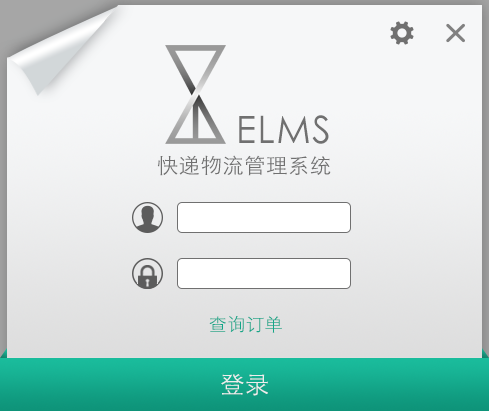
<style>
.page{position:relative;width:489px;height:411px}
.page>*{position:absolute;margin:0}
.t1{font:21.1px/42.1px "STXihei";letter-spacing:0.035em;color:#707070}
.t2{font:37.6px/42.1px "STXihei";letter-spacing:0.035em;color:#707070}
.t3{font:18px "STXihei";letter-spacing:0.035em;color:#13a689}
.t4{font:24px "STXihei";letter-spacing:0.035em;color:#eeeeee}
</style>
<div class="page">
<p class="t1" style="left:157px;top:115px;width:174px;height:61px;text-align:right"><span class="t2">ELMS<br></span>快递物流管理系统</p>
<p class="t3" style="left:209px;top:316px;width:73px;height:17px">查询订单</p>
<p class="t4" style="left:221px;top:374px;width:47px;height:22px">登录</p>
</div>
